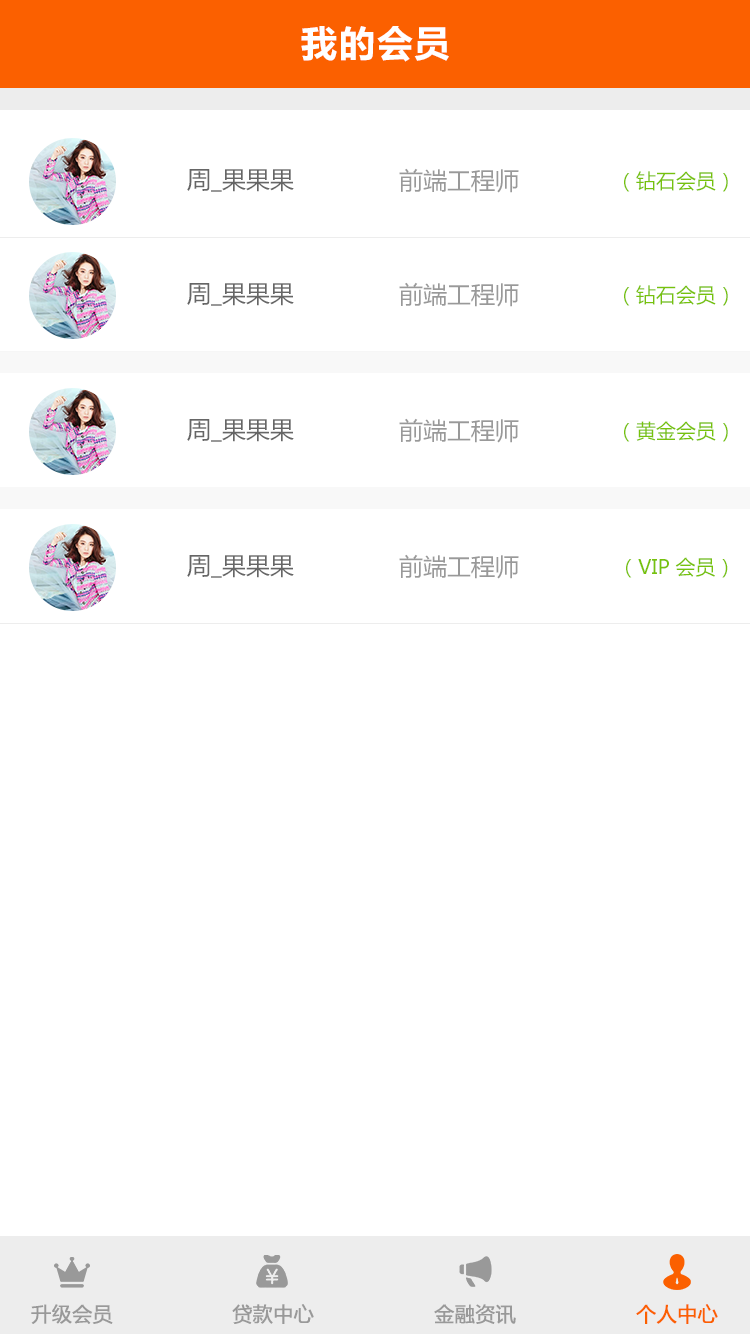
<style>
.page{position:relative;width:750px;height:1334px;background:#ffffff}
.page>*{position:absolute;margin:0}
.t1{font:36px "MicrosoftYaHei-Bold";letter-spacing:0.05em;color:#ffffff}
.t2{font:24px "MicrosoftYaHei";color:#666666}
.t3{font:24px "MicrosoftYaHei";color:#999999}
.t4{font:20px "MicrosoftYaHei";color:#77c20c}
.t5{font:20px "MicrosoftYaHei";color:#999999;font-weight:bold}
.t6{font:20px "MicrosoftYaHei";color:#fb6000;font-weight:bold}
</style>
<div class="page">
<p class="t1" style="left:301px;top:26px;width:148px;height:36px">我的会员</p>
<p class="t2" style="left:187px;top:169px;width:107px;height:23px">周_果果果</p>
<p class="t3" style="left:399px;top:168px;width:120px;height:25px">前端工程师</p>
<p class="t4" style="left:624px;top:171px;width:104px;height:21px">（钻石会员）</p>
<p class="t2" style="left:187px;top:283px;width:107px;height:23px">周_果果果</p>
<p class="t3" style="left:399px;top:282px;width:120px;height:25px">前端工程师</p>
<p class="t4" style="left:624px;top:285px;width:104px;height:21px">（钻石会员）</p>
<p class="t2" style="left:187px;top:419px;width:107px;height:23px">周_果果果</p>
<p class="t3" style="left:399px;top:418px;width:120px;height:25px">前端工程师</p>
<p class="t4" style="left:624px;top:421px;width:104px;height:21px">（黄金会员）</p>
<p class="t2" style="left:187px;top:555px;width:107px;height:23px">周_果果果</p>
<p class="t3" style="left:399px;top:554px;width:120px;height:25px">前端工程师</p>
<p class="t4" style="left:626px;top:557px;width:102px;height:21px">（VIP 会员）</p>
<p class="t5" style="left:31px;top:1304px;width:82px;height:20px">升级会员</p>
<p class="t5" style="left:232px;top:1304px;width:82px;height:20px">贷款中心</p>
<p class="t5" style="left:434px;top:1304px;width:82px;height:20px">金融资讯</p>
<p class="t6" style="left:636px;top:1304px;width:82px;height:20px">个人中心</p>
</div>
